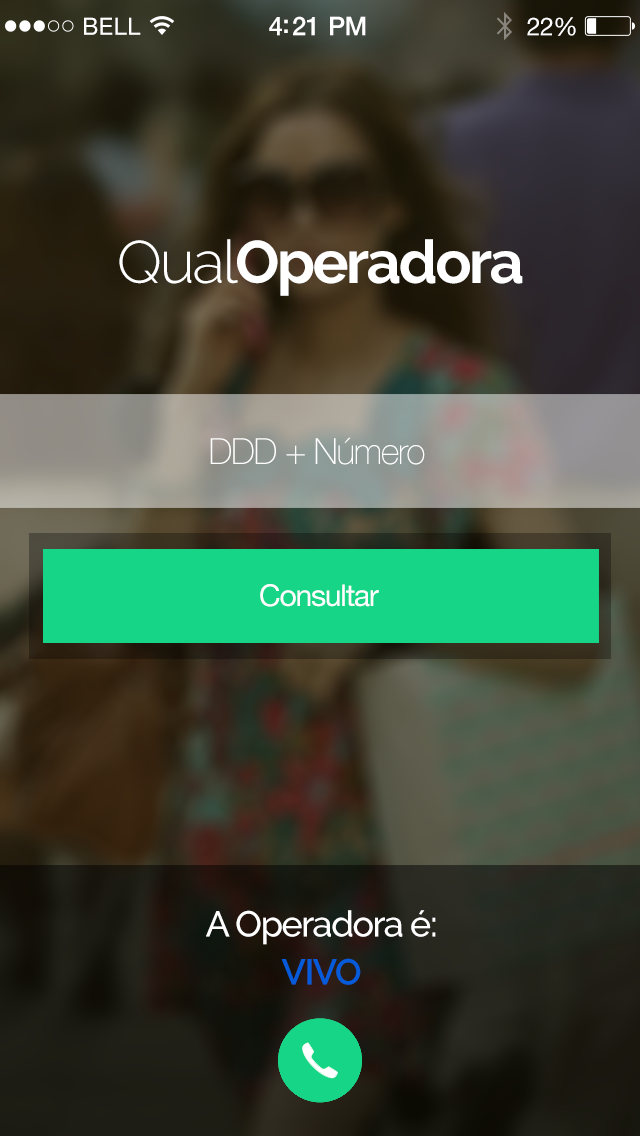
<style>
.page{position:relative;width:640px;height:1136px}
.page>*{position:absolute;margin:0}
.t1{font:23.9px "HelveticaNeue";letter-spacing:0.02em;color:#ffffff}
.t2{font:25.9px "HelveticaNeue-Medium";letter-spacing:-0.02em;color:#ffffff}
.t3{font:24.9px "HelveticaNeue";letter-spacing:-0.02em;color:#ffffff}
.t4{font:60px "Raleway-Bold";letter-spacing:-0.04em;color:#ffffff}
.t5{font:60px "Raleway-Light";letter-spacing:-0.04em;color:#ffffff}
.t6{font:36px "HelveticaNeue-Thin";letter-spacing:-0.04em;color:#ffffff}
.t7{font:30px "HelveticaNeue";letter-spacing:-0.04em;color:#ffffff}
.t8{font:36px/24px "Raleway-Medium";letter-spacing:-0.04em;color:#ffffff}
.t9{font:36px/24px "Raleway-SemiBold";letter-spacing:-0.04em;color:#055bd9}
</style>
<div class="page">
<p class="t1" style="left:84px;top:17px;width:57px;height:18px">BELL</p>
<p class="t2" style="left:269px;top:16px;width:97px;height:20px">4:21 PM</p>
<p class="t3" style="left:527px;top:17px;width:49px;height:19px">22%</p>
<p class="t4" style="left:119px;top:239px;width:404px;height:57px"><span class="t5">Qual</span>Operadora</p>
<p class="t6" style="left:210px;top:437px;width:215px;height:28px">DDD + Número</p>
<p class="t7" style="left:260px;top:584px;width:119px;height:23px">Consultar</p>
<p class="t8" style="left:206px;top:910px;width:230px;height:75px;text-align:center">A Operadora é:<br><br><span class="t9">VIVO</span></p>
</div>
